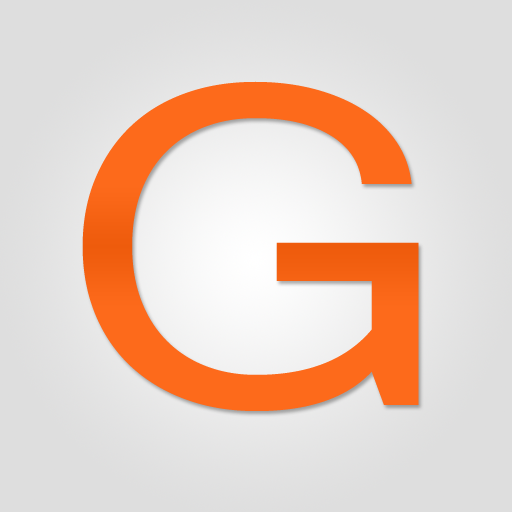
<style>
.page{position:relative;width:512px;height:512px;background:#dedede}
.page>*{position:absolute;margin:0}
.t1{font:494.5px "Vrinda";letter-spacing:-0.05em;color:#fd610d;scale:1.13 1}
</style>
<div class="page">
<p class="t1" style="left:82px;top:81px;width:337px;height:330px">G</p>
</div>
